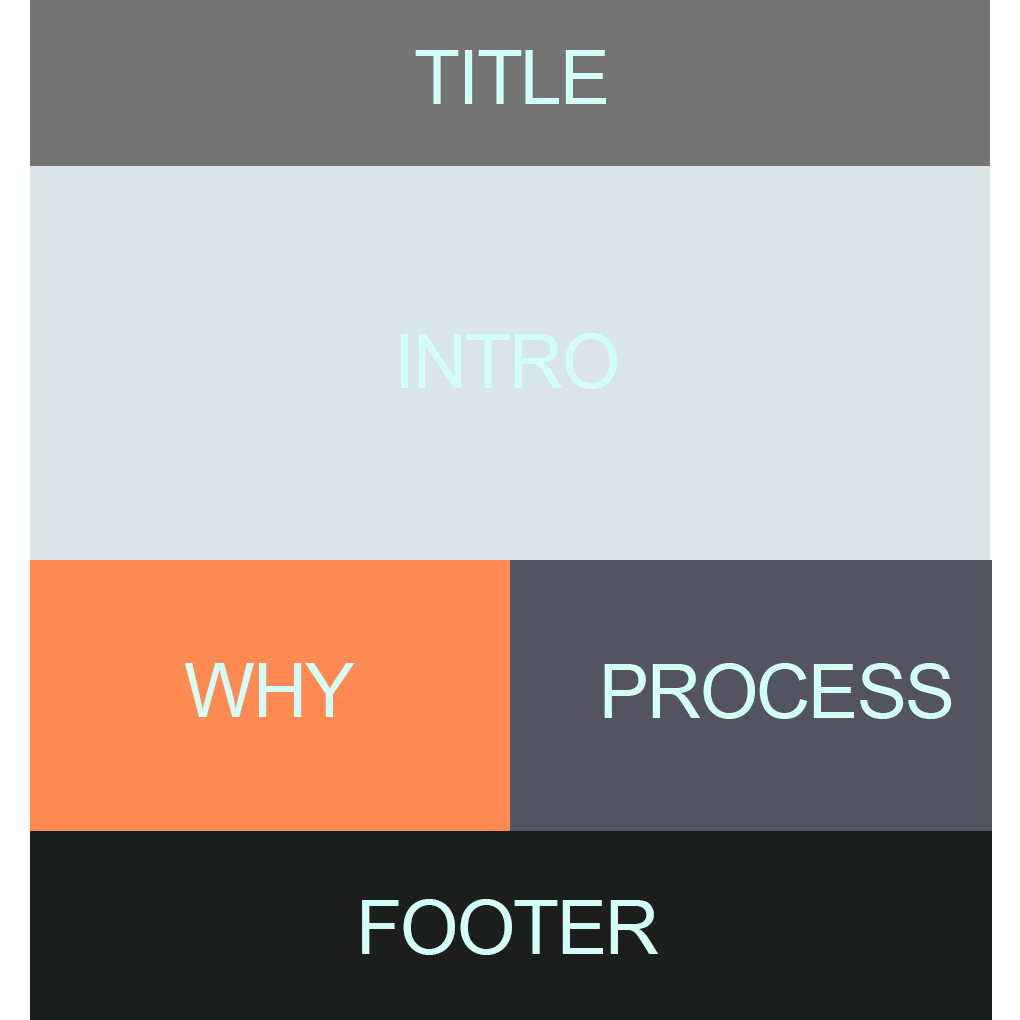
<style>
.page{position:relative;width:1020px;height:1020px;background:#dae5e7}
.page>*{position:absolute;margin:0}
.t1{font:75px "ArialMT";letter-spacing:-0.025em;color:#d2fff7}
</style>
<div class="page">
<p class="t1" style="left:415px;top:50px;width:191px;height:54px">TITLE</p>
<p class="t1" style="left:401px;top:333px;width:216px;height:56px">INTRO</p>
<p class="t1" style="left:185px;top:663px;width:170px;height:54px">WHY</p>
<p class="t1" style="left:604px;top:663px;width:348px;height:56px">PROCESS</p>
<p class="t1" style="left:362px;top:899px;width:296px;height:56px">FOOTER</p>
</div>
